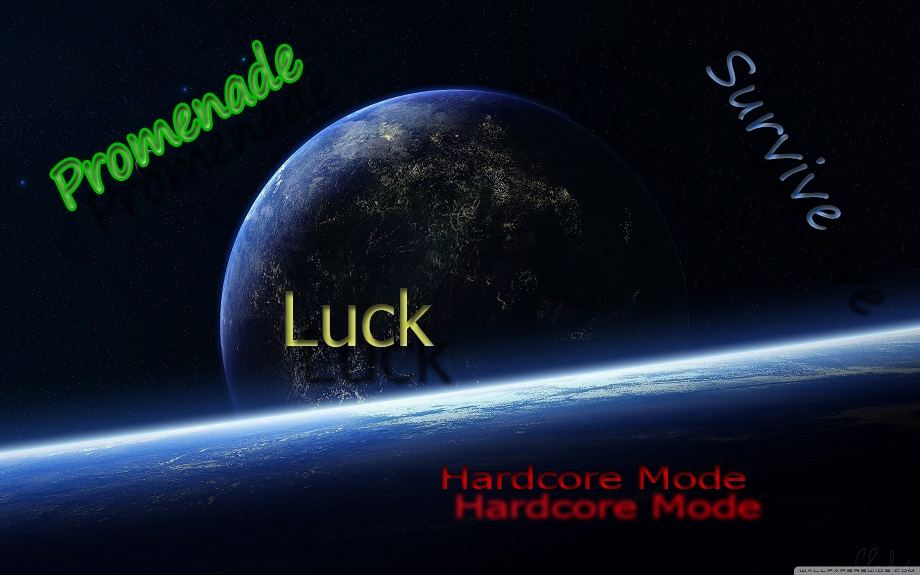
<style>
.page{position:relative;width:920px;height:575px}
.page>*{position:absolute;margin:0}
.t1{font:58.2px "SegoePrint";scale:0.83 1}
.t2{font:58px "SegoePrint";scale:0.96 1}
.t3{font:75.6px "Tahoma"}
.t4{font:31.8px "Tahoma";scale:1.44 1}
</style>
<div class="page">
<p class="t1" style="left:52px;top:42px;width:249px;height:167px;rotate:-30deg">Promenade</p>
<p class="t2" style="left:705px;top:50px;width:136px;height:180px;rotate:56deg">Survive</p>
<p class="t3" style="left:285px;top:288px;width:150px;height:59px">Luck</p>
<p class="t4" style="left:442px;top:465px;width:303px;height:24px">Hardcore Mode</p>
</div>
